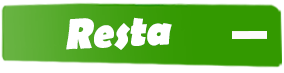
<style>
.page{position:relative;width:284px;height:73px;background:#ffffff}
.page>*{position:absolute;margin:0}
.t1{font:44.5px "BerlinSansFB-Bold";color:#ffffff;scale:0.9 1}
</style>
<div class="page">
<p class="t1" style="left:66px;top:17px;width:106px;height:33px;rotate:-3deg">Resta</p>
</div>
